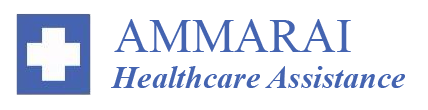
<style>
.page{position:relative;width:428px;height:110px;background:#ffffff}
.page>*{position:absolute;margin:0}
.t1{font:48px "TimesNewRomanPSMT";color:#4464b1}
.t2{font:32px "TimesNewRomanPS-BoldItalicMT";color:#4464b1}
</style>
<div class="page">
<p class="t1" style="left:114px;top:19px;width:237px;height:33px">AMMARAI</p>
<p class="t2" style="left:111px;top:66px;width:294px;height:22px">Healthcare Assistance</p>
</div>
